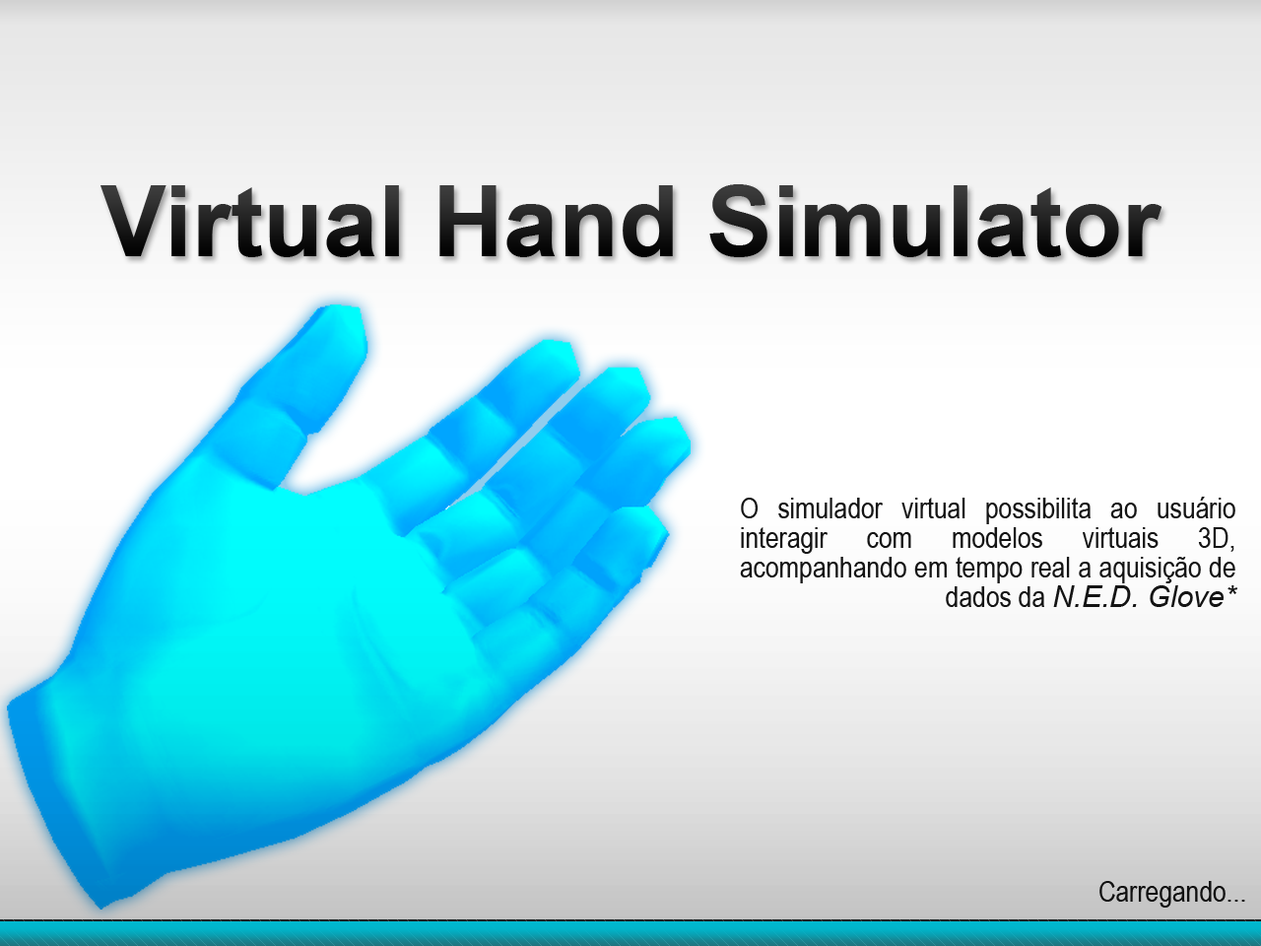
<style>
.page{position:relative;width:1261px;height:946px}
.page>*{position:absolute;margin:0}
.t1{font:98.5px "Arial-BoldMT";color:#141414}
.t2{font:29.6px/29.6px "ArialNarrow";color:#141414}
.t3{font:29.6px/29.6px "Arial-ItalicMT";color:#141414}
.t4{font:29.6px "ArialNarrow";color:#141414}
</style>
<div class="page">
<p class="t1" style="left:100px;top:184px;width:1061px;height:73px">Virtual Hand Simulator</p>
<p class="t2" style="left:740px;top:496px;width:497px;height:111px;text-align:justify">O simulador virtual possibilita ao usuário interagir com modelos virtuais 3D, acompanhando em tempo real a aquisição de dados da <span class="t3">N.E.D. Glove*</span></p>
<p class="t4" style="left:1099px;top:881px;width:146px;height:26px">Carregando...</p>
</div>
